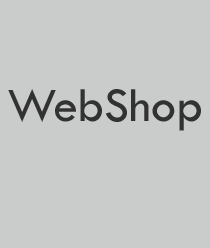
<style>
.page{position:relative;width:210px;height:248px;background:#cacccb}
.page>*{position:absolute;margin:0}
.t1{font:50px "TwCenMT-Regular";color:#323232}
</style>
<div class="page">
<p class="t1" style="left:8px;top:89px;width:193px;height:42px">WebShop</p>
</div>
